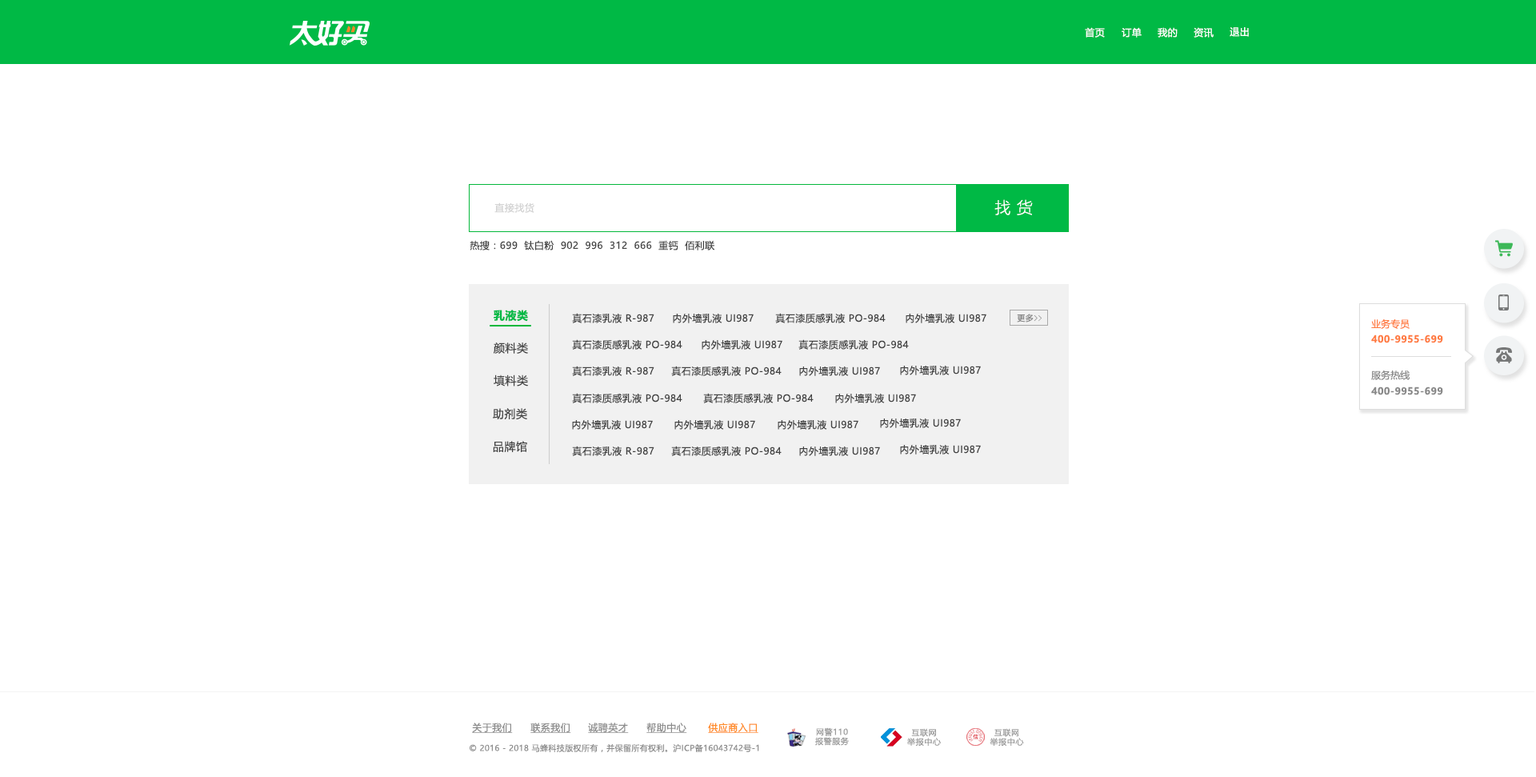
<style>
.page{position:relative;width:1536px;height:777px;background:#ffffff}
.page>*{position:absolute;margin:0}
.t1{font:9.6px "MicrosoftYaHeiUI";letter-spacing:0.04em;color:#ffffff}
.t2{font:9.6px "MicrosoftYaHeiUI";letter-spacing:0.04em;color:#d2d2d2}
.t3{font:16px "MicrosoftYaHeiUILight";letter-spacing:0.04em;color:#ffffff}
.t4{font:9.6px "MicrosoftYaHeiUI";letter-spacing:0.04em;color:#444444}
.t5{font:11.2px "MicrosoftYaHeiUI-Bold";letter-spacing:0.04em;color:#00b945}
.t6{font:9.6px "MicrosoftYaHeiUI";letter-spacing:0.04em;color:#424242}
.t7{font:8px "MicrosoftYaHeiUI";letter-spacing:0.04em;color:#848484}
.t8{font:8px "FangSong";letter-spacing:0.04em;color:#848484}
.t9{font:9.6px "MicrosoftYaHeiUI";color:#ff7b41}
.t10{font:9.6px "MicrosoftYaHeiUI-Bold";letter-spacing:0.04em;color:#ff7b41}
.t11{font:11.2px "MicrosoftYaHeiUI";letter-spacing:0.04em;color:#424242}
.t12{font:9.6px "MicrosoftYaHeiUI";color:#888888}
.t13{font:9.6px "MicrosoftYaHeiUI-Bold";letter-spacing:0.04em;color:#888888}
.t14{font:9.6px "MicrosoftYaHeiUI";letter-spacing:0.04em;color:#8c8c8c;text-decoration:underline}
.t15{font:9.6px "MicrosoftYaHeiUI";letter-spacing:0.04em;color:#ff8b25;text-decoration:underline}
.t16{font:8px/9.3px "MicrosoftYaHei";letter-spacing:0.06em;color:#999999}
.t17{font:8px "MicrosoftYaHeiUI";letter-spacing:0.04em;color:#8c8c8c}
</style>
<div class="page">
<p class="t1" style="left:1084px;top:27px;width:20px;height:11px">首页</p>
<p class="t1" style="left:1121px;top:27px;width:20px;height:11px">订单</p>
<p class="t1" style="left:1157px;top:27px;width:20px;height:11px">我的</p>
<p class="t1" style="left:1193px;top:27px;width:20px;height:11px">资讯</p>
<p class="t1" style="left:1229px;top:27px;width:19px;height:10px">退出</p>
<p class="t2" style="left:494px;top:202px;width:40px;height:11px">直接找货</p>
<p class="t3" style="left:994px;top:199px;width:38px;height:16px">找 货</p>
<p class="t4" style="left:469px;top:240px;width:245px;height:10px">热搜：699  钛白粉  902  996  312  666  重钙  佰利联</p>
<p class="t5" style="left:493px;top:310px;width:35px;height:12px">乳液类</p>
<p class="t6" style="left:572px;top:313px;width:82px;height:10px">真石漆乳液 R-987</p>
<p class="t6" style="left:673px;top:313px;width:80px;height:10px">内外墙乳液 UI987</p>
<p class="t6" style="left:775px;top:313px;width:110px;height:10px">真石漆质感乳液 PO-984</p>
<p class="t6" style="left:905px;top:313px;width:81px;height:10px">内外墙乳液 UI987</p>
<p class="t7" style="left:1016px;top:314px;width:25px;height:8px">更多<span class="t8">&gt;&gt;</span></p>
<p class="t9" style="left:1371px;top:318px;width:38px;height:11px">业务专员</p>
<p class="t6" style="left:572px;top:339px;width:110px;height:10px">真石漆质感乳液 PO-984</p>
<p class="t6" style="left:701px;top:339px;width:81px;height:10px">内外墙乳液 UI987</p>
<p class="t6" style="left:798px;top:339px;width:111px;height:10px">真石漆质感乳液 PO-984</p>
<p class="t10" style="left:1371px;top:334px;width:72px;height:9px">400-9955-699</p>
<p class="t11" style="left:493px;top:342px;width:35px;height:11px">颜料类</p>
<p class="t6" style="left:572px;top:365px;width:82px;height:11px">真石漆乳液 R-987</p>
<p class="t6" style="left:671px;top:365px;width:110px;height:11px">真石漆质感乳液 PO-984</p>
<p class="t6" style="left:799px;top:365px;width:81px;height:11px">内外墙乳液 UI987</p>
<p class="t6" style="left:900px;top:365px;width:80px;height:10px">内外墙乳液 UI987</p>
<p class="t11" style="left:493px;top:374px;width:35px;height:12px">填料类</p>
<p class="t12" style="left:1371px;top:369px;width:38px;height:11px">服务热线</p>
<p class="t13" style="left:1371px;top:386px;width:72px;height:9px">400-9955-699</p>
<p class="t6" style="left:572px;top:393px;width:110px;height:10px">真石漆质感乳液 PO-984</p>
<p class="t6" style="left:703px;top:393px;width:110px;height:10px">真石漆质感乳液 PO-984</p>
<p class="t6" style="left:835px;top:393px;width:81px;height:10px">内外墙乳液 UI987</p>
<p class="t11" style="left:493px;top:408px;width:34px;height:12px">助剂类</p>
<p class="t6" style="left:572px;top:419px;width:81px;height:10px">内外墙乳液 UI987</p>
<p class="t6" style="left:674px;top:419px;width:81px;height:10px">内外墙乳液 UI987</p>
<p class="t6" style="left:777px;top:419px;width:81px;height:10px">内外墙乳液 UI987</p>
<p class="t6" style="left:880px;top:417px;width:81px;height:11px">内外墙乳液 UI987</p>
<p class="t11" style="left:493px;top:441px;width:34px;height:11px">品牌馆</p>
<p class="t6" style="left:572px;top:445px;width:82px;height:11px">真石漆乳液 R-987</p>
<p class="t6" style="left:671px;top:445px;width:110px;height:11px">真石漆质感乳液 PO-984</p>
<p class="t6" style="left:799px;top:445px;width:81px;height:11px">内外墙乳液 UI987</p>
<p class="t6" style="left:900px;top:444px;width:80px;height:10px">内外墙乳液 UI987</p>
<p class="t14" style="left:472px;top:722px;width:41px;height:11px">关于我们</p>
<p class="t14" style="left:530px;top:722px;width:41px;height:11px">联系我们</p>
<p class="t14" style="left:588px;top:722px;width:41px;height:11px">诚聘英才</p>
<p class="t14" style="left:646px;top:722px;width:41px;height:11px">帮助中心</p>
<p class="t15" style="left:708px;top:722px;width:50px;height:11px">供应商入口</p>
<p class="t16" style="left:815px;top:727px;width:34px;height:18px;text-align:center">网警110<br>报警服务</p>
<p class="t16" style="left:907px;top:728px;width:34px;height:17px;text-align:center">互联网<br>举报中心</p>
<p class="t16" style="left:989px;top:728px;width:35px;height:17px;text-align:center">互联网<br>举报中心</p>
<p class="t17" style="left:469px;top:743px;width:290px;height:9px">© 2016 - 2018 马蜂科技版权所有，并保留所有权利。沪ICP备16043742号-1</p>
</div>
